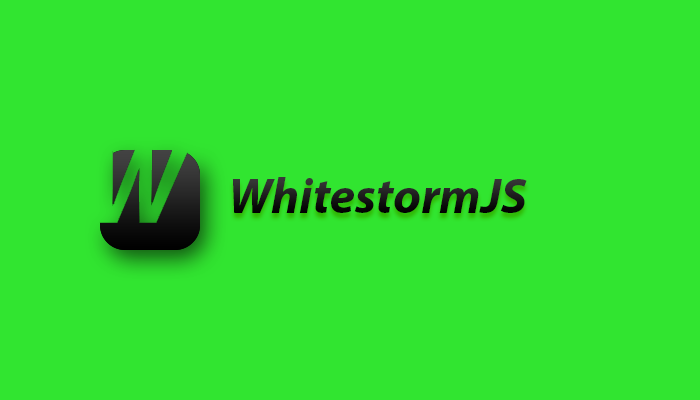
<style>
.page{position:relative;width:700px;height:400px;background:#31e530}
.page>*{position:absolute;margin:0}
.t1{font:50px "MyriadPro-BoldIt";color:#191919}
</style>
<div class="page">
<p class="t1" style="left:232px;top:177px;width:295px;height:36px">WhitestormJS</p>
</div>
